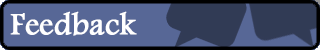
<style>
.page{position:relative;width:320px;height:50px;background:#576796}
.page>*{position:absolute;margin:0}
.t1{font:32px "FootlightMTLight";color:#ffffff;font-weight:bold}
</style>
<div class="page">
<p class="t1" style="left:10px;top:11px;width:127px;height:25px">Feedback</p>
</div>
